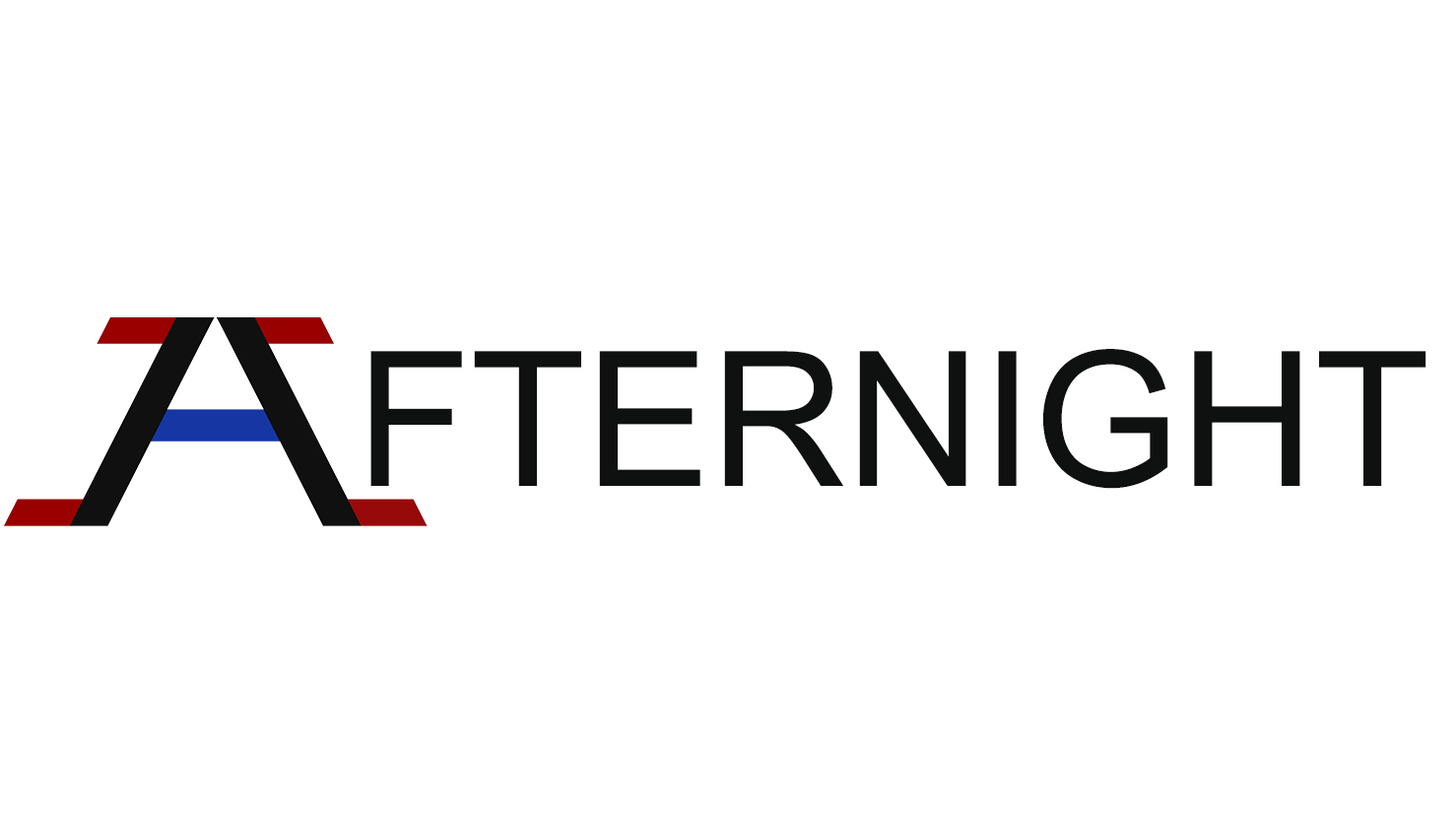
<style>
.page{position:relative;width:1456px;height:819px;background:#ffffff}
.page>*{position:absolute;margin:0}
.t1{font:187.7px "ArialMT";color:#0f1010}
</style>
<div class="page">
<p class="t1" style="left:370px;top:349px;width:1057px;height:140px">FTERNIGHT</p>
</div>
